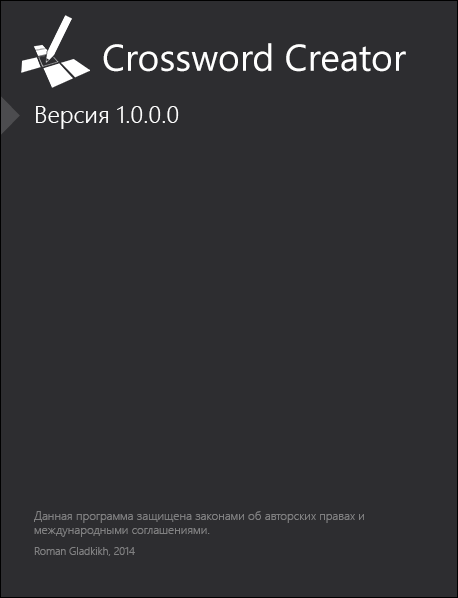
<style>
.page{position:relative;width:458px;height:598px;background:#2d2d30}
.page>*{position:absolute;margin:0}
.t1{font:37.3px "SegoeUI";color:#ffffff}
.t2{font:24px "SegoeUI-Semilight";color:#ffffff}
.t3{font:12px "SegoeUI-Light";color:#808081}
.t4{font:10.7px "SegoeUI-Semilight";color:#808081}
</style>
<div class="page">
<p class="t1" style="left:103px;top:43px;width:303px;height:29px">Crossword Creator</p>
<p class="t2" style="left:36px;top:106px;width:143px;height:23px">Версия 1.0.0.0</p>
<p class="t3" style="left:34px;top:511px;width:330px;height:26px">Данная программа защищена законами об авторских правах и международными соглашениями.</p>
<p class="t4" style="left:34px;top:547px;width:101px;height:9px">Roman Gladkikh, 2014</p>
</div>
